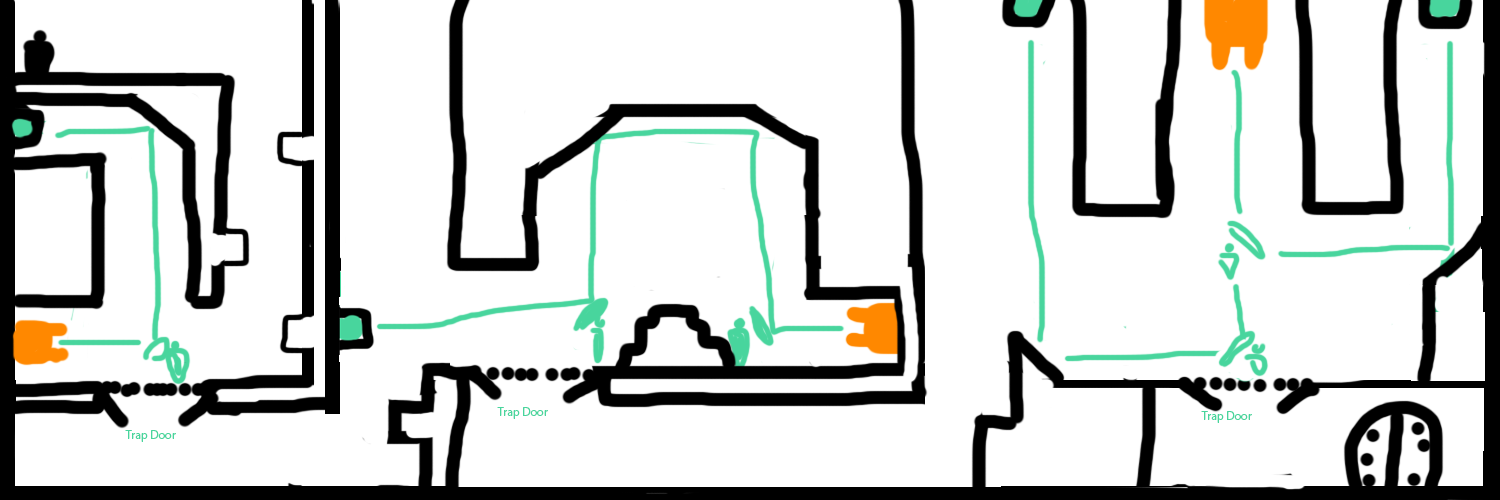
<style>
.page{position:relative;width:1500px;height:500px;background:#ffffff}
.page>*{position:absolute;margin:0}
.t1{font:12px "MyriadPro-Regular";color:#48d59d}
</style>
<div class="page">
<p class="t1" style="left:497px;top:407px;width:51px;height:12px">Trap Door</p>
<p class="t1" style="left:1201px;top:411px;width:51px;height:12px">Trap Door</p>
<p class="t1" style="left:125px;top:430px;width:51px;height:12px">Trap Door</p>
</div>
